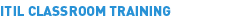
<style>
.page{position:relative;width:250px;height:23px;background:#ffffff}
.page>*{position:absolute;margin:0}
.t1{font:13.4px "DINPro-Black";color:#2992d6}
</style>
<div class="page">
<p class="t1" style="left:1px;top:6px;width:170px;height:10px">ITIL CLASSROOM TRAINING</p>
</div>
